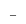
<style>
.page{position:relative;width:26px;height:24px;background:#ffffff}
.page>*{position:absolute;margin:0}
.t1{font:12px "MyriadHebrew-Regular";color:#626262}
</style>
<div class="page">
<p class="t1" style="left:9px;top:15px;width:8px;height:1px">_</p>
</div>
